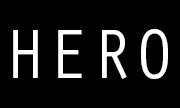
<style>
.page{position:relative;width:180px;height:108px;background:#000000}
.page>*{position:absolute;margin:0}
.t1{font:72px "OratorStd";color:#ffffff}
</style>
<div class="page">
<p class="t1" style="left:13px;top:29px;width:155px;height:50px">HERO</p>
</div>
